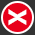
<style>
.page{position:relative;width:35px;height:35px;background:#e8001b}
.page>*{position:absolute;margin:0}
.t1{font:25.2px "SegoeUI-Bold";color:#ffffff}
</style>
<div class="page">
<p class="t1" style="left:8px;top:9px;width:19px;height:17px;rotate:90deg">X</p>
</div>
